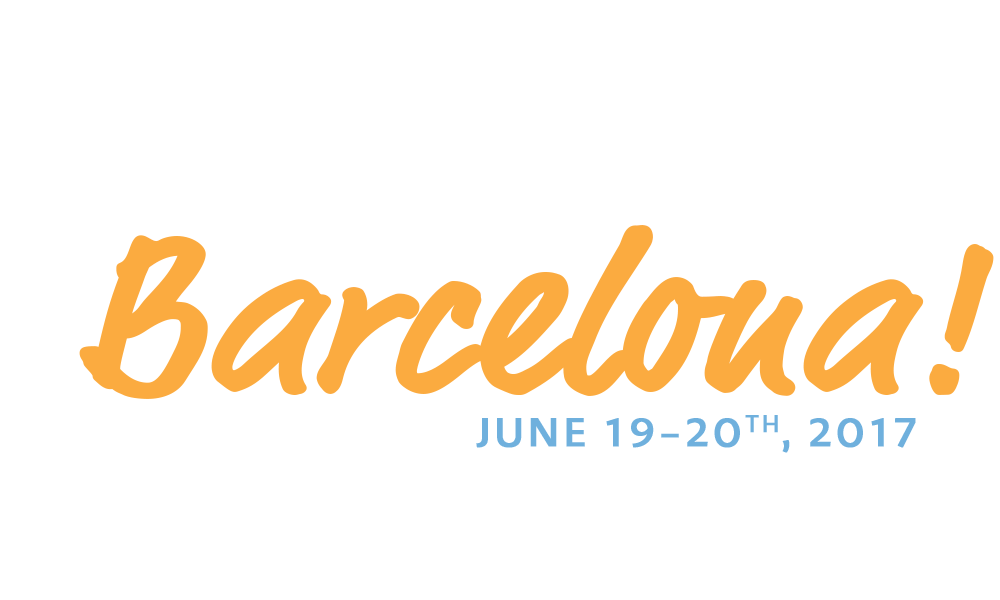
<style>
.page{position:relative;width:1000px;height:600px;background:#ffffff}
.page>*{position:absolute;margin:0}
.t1{font:220px "MarketOT";color:#fbab40;font-weight:bold}
.t2{font:42px "PetalaPro";letter-spacing:0.07em;color:#6fb0dd;font-weight:bold}
</style>
<div class="page">
<p class="t1" style="left:79px;top:225px;width:915px;height:174px">Barcelona!</p>
<p class="t2" style="left:476px;top:415px;width:440px;height:38px">JUNE 19-20TH, 2017</p>
</div>
